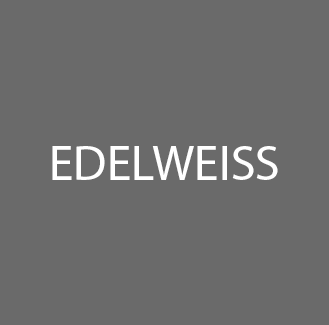
<style>
.page{position:relative;width:329px;height:325px;background:#6a6a6a}
.page>*{position:absolute;margin:0}
.t1{font:50px "MyriadPro-Regular";color:#ffffff;text-transform:uppercase}
</style>
<div class="page">
<p class="t1" style="left:52px;top:146px;width:226px;height:34px">Edelweiss</p>
</div>
